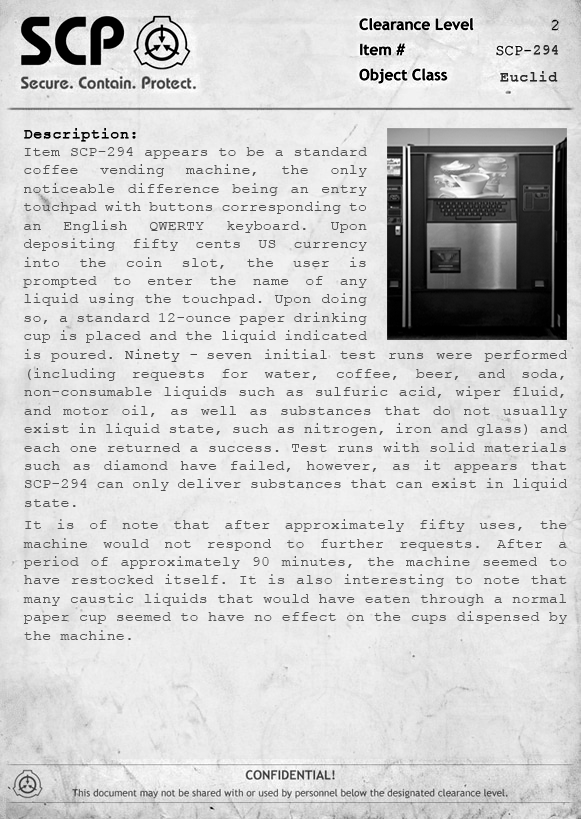
<style>
.page{position:relative;width:581px;height:819px}
.page>*{position:absolute;margin:0}
.t1{font:15.4px "CourierNewPSMT";color:#282828;font-weight:bold;scale:0.92 1}
.t2{font:15.4px "CourierNewPSMT";color:#282828;font-weight:bold}
.t3{font:15.4px "CourierNewPSMT";color:#4f4f4f}
.t4{font:15.4px "CourierNewPSMT";color:#000000;font-weight:bold}
.t5{font:15.4px "CourierNewPSMT";color:#444444}
.t6{font:15.4px "CourierNewPSMT";color:#282828}
.t7{font:15.4px "CourierNewPSMT";color:#525252}
</style>
<div class="page">
<p class="t1" style="left:533px;top:45px;width:25px;height:10px">294</p>
<p class="t2" style="left:500px;top:71px;width:58px;height:11px">Euclid</p>
<p class="t3" style="left:23px;top:128px;width:344px;height:234px;text-align:justify"><span class="t4">Description: <br></span>Item SCP-294 appears to be a standard coffee vending machine, the only noticeable difference being an entry touchpad with buttons corresponding to an English QWERTY keyboard. Upon depositing fifty cents US currency into the coin slot, the user is prompted to enter the name of any liquid using the touchpad. Upon doing so, a standard 12-ounce paper drinking cup is placed and the liquid indicated is poured.<span class="t5"> Ninety -</span></p>
<p class="t3" style="left:24px;top:349px;width:543px;height:158px;text-align:justify"><span class="t6">      </span>          seven initial test runs were performed (including requests for water, coffee, beer, and soda, non-consumable liquids such as sulfuric acid, wiper fluid, and motor oil, as well as substances that do not usually exist in liquid state, such as nitrogen, iron and glass) and each one returned a success. Test runs with solid materials such as diamond have failed, however, as it appears that SCP-294 can only deliver substances that can exist in liquid state.</p>
<p class="t7" style="left:23px;top:519px;width:544px;height:121px;text-align:justify">It is of note that after approximately fifty uses, the machine would not respond to further requests. After a period of approximately 90 minutes, the machine seemed to have restocked itself. It is also interesting to note that many caustic liquids that would have eaten through a normal paper cup seemed to have no effect on the cups dispensed by the machine.</p>
</div>
